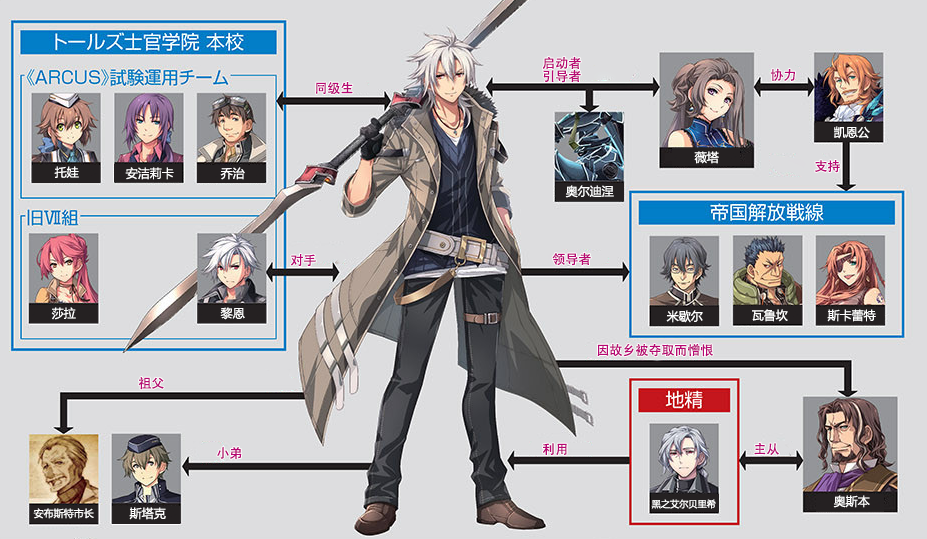
<style>
.page{position:relative;width:927px;height:539px;background:#dddddf}
.page>*{position:absolute;margin:0}
.t1{font:13px/13px "AdobeHeitiStd-Regular";color:#b70773}
.t2{font:13px "AdobeHeitiStd-Regular";color:#b70773}
.t3{font:12px "MicrosoftYaHei";color:#ffffff}
.t4{font:10px "MicrosoftYaHei";color:#ffffff}
.t5{font:9.2px "MicrosoftYaHei";color:#ffffff}
</style>
<div class="page">
<p class="t1" style="left:542px;top:56px;width:39px;height:27px">启动者<br>引导者</p>
<p class="t2" style="left:770px;top:68px;width:25px;height:13px">协力</p>
<p class="t2" style="left:316px;top:82px;width:37px;height:13px">同级生</p>
<p class="t3" style="left:834px;top:126px;width:36px;height:13px">凯恩公</p>
<p class="t3" style="left:694px;top:151px;width:25px;height:13px">薇塔</p>
<p class="t2" style="left:815px;top:160px;width:25px;height:13px">支持</p>
<p class="t3" style="left:54px;top:166px;width:25px;height:12px">托娃</p>
<p class="t3" style="left:125px;top:167px;width:49px;height:13px">安洁莉卡</p>
<p class="t3" style="left:220px;top:167px;width:25px;height:13px">乔治</p>
<p class="t3" style="left:565px;top:185px;width:49px;height:13px">奥尔迪涅</p>
<p class="t2" style="left:290px;top:254px;width:26px;height:12px">对手</p>
<p class="t2" style="left:552px;top:252px;width:39px;height:14px">领导者</p>
<p class="t3" style="left:51px;top:307px;width:25px;height:13px">莎拉</p>
<p class="t3" style="left:220px;top:307px;width:25px;height:13px">黎恩</p>
<p class="t3" style="left:666px;top:310px;width:37px;height:13px">米歇尔</p>
<p class="t3" style="left:752px;top:309px;width:36px;height:13px">瓦鲁坎</p>
<p class="t3" style="left:827px;top:309px;width:49px;height:13px">斯卡蕾特</p>
<p class="t2" style="left:597px;top:343px;width:116px;height:14px">因故乡被夺取而憎恨</p>
<p class="t2" style="left:138px;top:377px;width:26px;height:13px">祖父</p>
<p class="t2" style="left:217px;top:447px;width:25px;height:13px">小弟</p>
<p class="t2" style="left:542px;top:443px;width:25px;height:12px">利用</p>
<p class="t2" style="left:754px;top:442px;width:25px;height:13px">主从</p>
<p class="t3" style="left:833px;top:495px;width:37px;height:13px">奥斯本</p>
<p class="t4" style="left:33px;top:508px;width:61px;height:11px">安布斯特市长</p>
<p class="t3" style="left:129px;top:507px;width:37px;height:13px">斯塔克</p>
<p class="t5" style="left:651px;top:499px;width:65px;height:10px">黑之艾尔贝里希</p>
</div>
